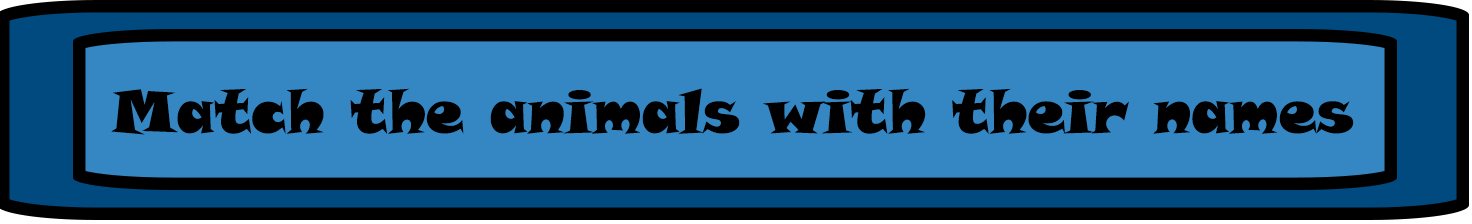
<style>
.page{position:relative;width:1472px;height:224px;background:#3587c3}
.page>*{position:absolute;margin:0}
.t1{font:60px "SnapITC-Regular";color:#000000}
</style>
<div class="page">
<p class="t1" style="left:111px;top:88px;width:1243px;height:47px">Match the animals with their names</p>
</div>
